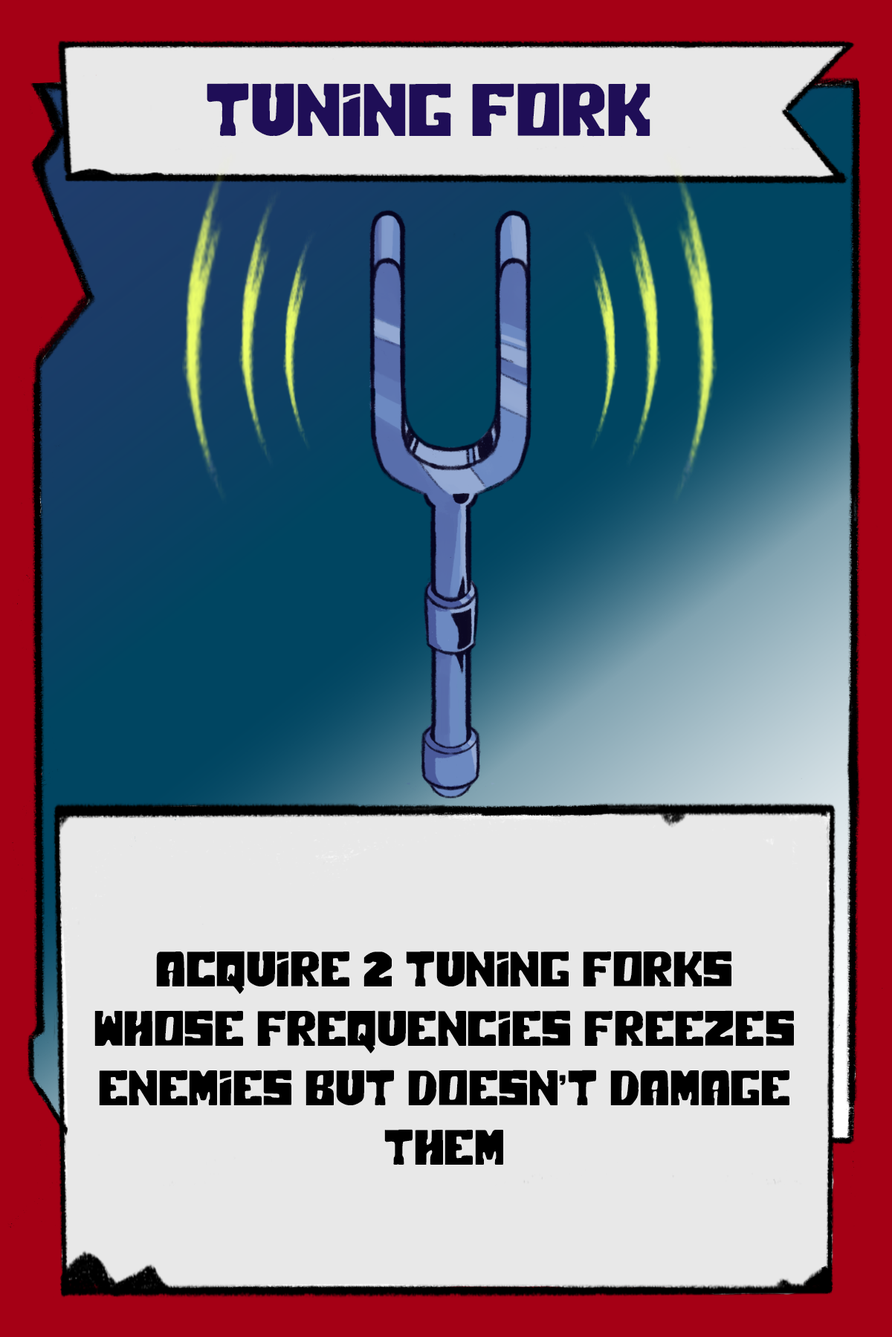
<style>
.page{position:relative;width:892px;height:1337px;background:#e8e8e8}
.page>*{position:absolute;margin:0}
.t1{font:74.3px "PolarPress";color:#1f0e57}
.t2{font:49.5px "PolarPress";color:#000000}
</style>
<div class="page">
<p class="t1" style="left:207px;top:83px;width:443px;height:54px">TUNING FORK</p>
<p class="t2" style="left:94px;top:951px;width:700px;height:214px;text-align:center">ACquire 2 tuning forks whose frequencies freezes enemies but doesn’t damage them</p>
</div>
